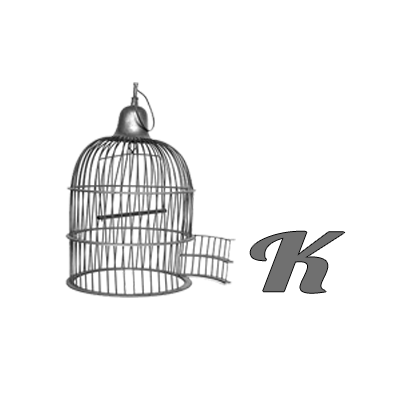
<style>
.page{position:relative;width:400px;height:400px;background:#ffffff}
.page>*{position:absolute;margin:0}
.t1{font:79.1px "Lobster1.4";color:#707070;scale:1.79 1}
</style>
<div class="page">
<p class="t1" style="left:250px;top:231px;width:95px;height:62px">K</p>
</div>
